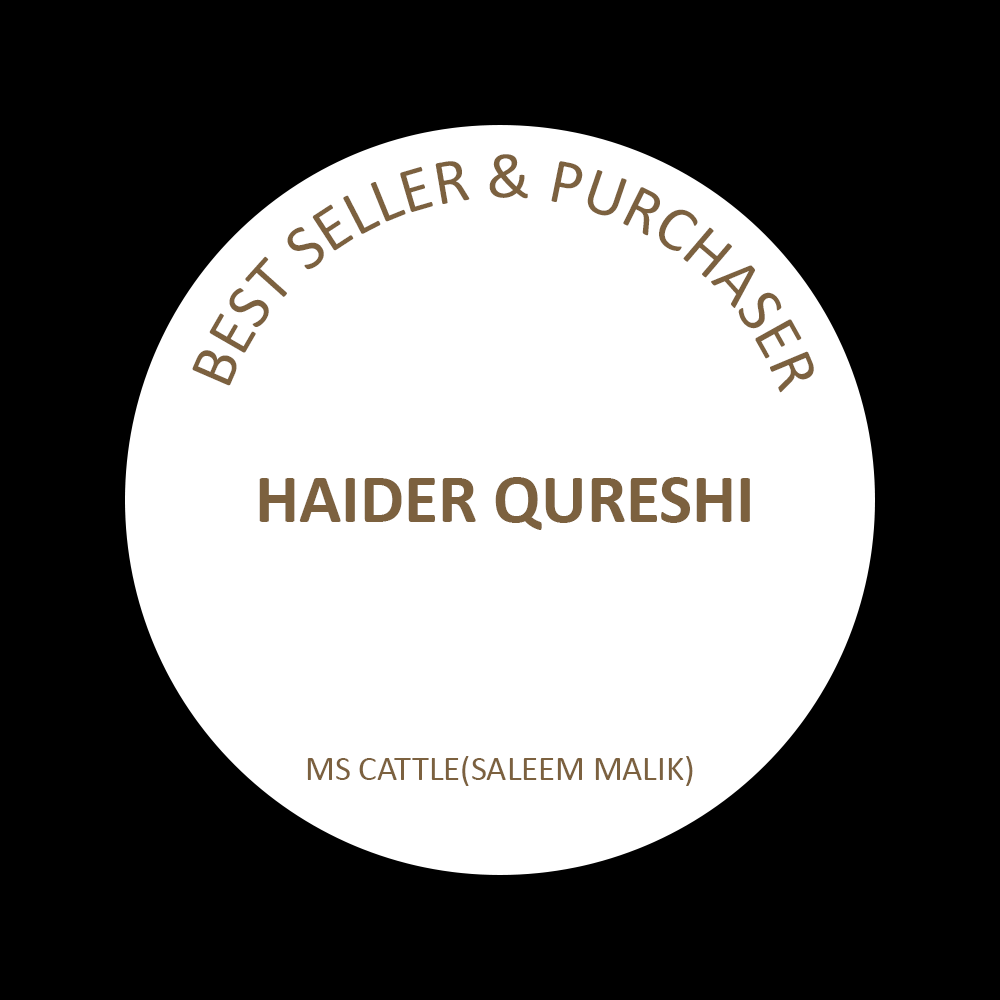
<style>
.page{position:relative;width:1000px;height:1000px;background:#000000}
.page>*{position:absolute;margin:0}
.t1{font:65.2px "Calibri";color:#7c613f}
.t2{font:69.8px "Calibri-Bold";color:#7c613f}
.t3{font:34.7px "Calibri";color:#7c613f}
</style>
<div class="page">
<p class="t1" style="left:192px;top:154px;width:622px;height:239px;rotate:-25deg">BEST SELLER &amp; PURCHASER</p>
<p class="t2" style="left:259px;top:477px;width:491px;height:53px">HAIDER QURESHI</p>
<p class="t3" style="left:307px;top:756px;width:386px;height:30px">MS CATTLE(SALEEM MALIK)</p>
</div>
